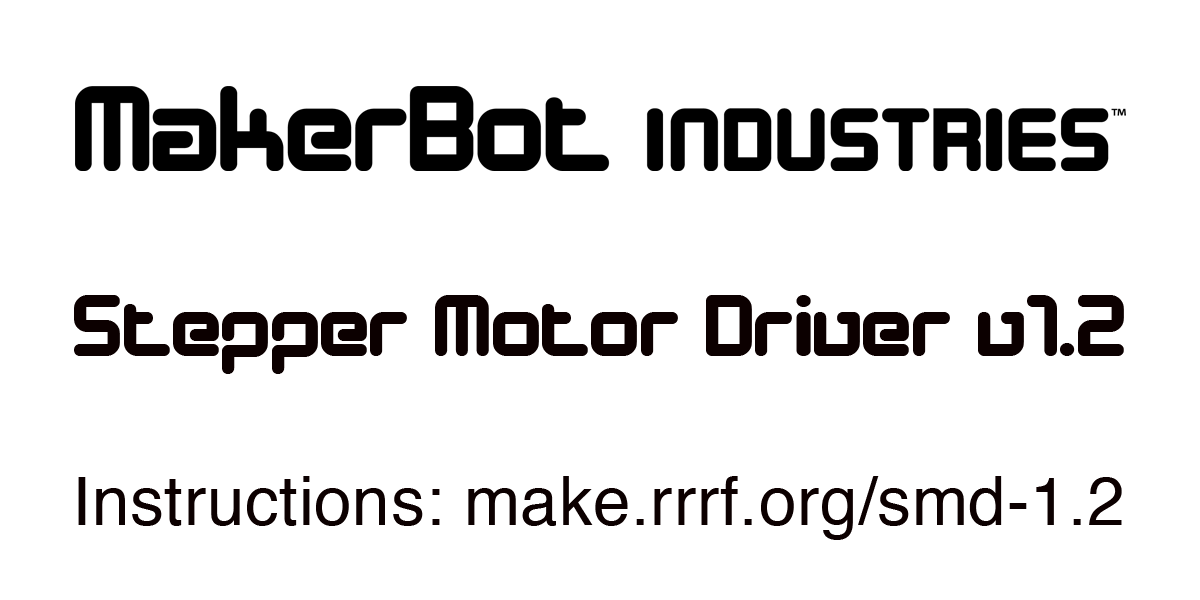
<style>
.page{position:relative;width:1200px;height:600px;background:#ffffff}
.page>*{position:absolute;margin:0}
.t1{font:89px "DesignerBlock";letter-spacing:0.01em;color:#0c0000}
.t2{font:67.4px "Helvetica";letter-spacing:0.01em;color:#0c0000}
</style>
<div class="page">
<p class="t1" style="left:74px;top:295px;width:1050px;height:79px">Stepper Motor Driver v1.2</p>
<p class="t2" style="left:78px;top:476px;width:1044px;height:64px">Instructions: make.rrrf.org/smd-1.2</p>
</div>
